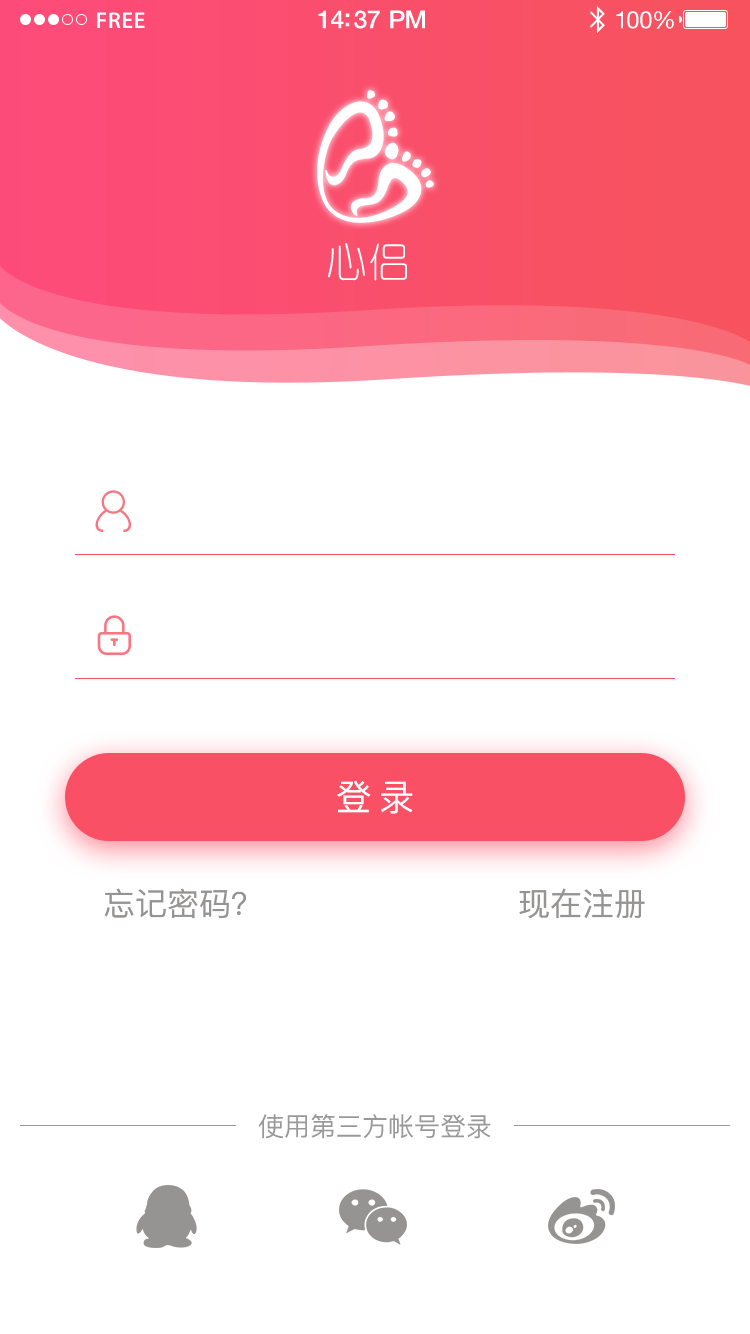
<style>
.page{position:relative;width:750px;height:1334px;background:#ffffff}
.page>*{position:absolute;margin:0}
.t1{font:23px "MyriadPro-Semibold";letter-spacing:0.02em;color:#ffffff}
.t2{font:25px "HelveticaNeue-Medium";letter-spacing:-0.02em;color:#ffffff}
.t3{font:24px "HelveticaNeue";letter-spacing:-0.02em;color:#ffffff}
.t4{font:40.9px "YouYuan";letter-spacing:0.05em;color:#ffffff}
.t5{font:36px "PingFang-SC-Medium";letter-spacing:0.2em;color:#ffffff}
.t6{font:32px "PingFang-SC-Medium";color:#969492;text-transform:uppercase}
.t7{font:26px "PingFang-SC-Medium";color:#999999;text-transform:uppercase}
</style>
<div class="page">
<p class="t1" style="left:97px;top:12px;width:48px;height:16px">FREE</p>
<p class="t2" style="left:318px;top:10px;width:107px;height:19px">14:37 PM</p>
<p class="t3" style="left:616px;top:11px;width:58px;height:18px">100%</p>
<p class="t4" style="left:328px;top:243px;width:79px;height:38px">心侣</p>
<p class="t5" style="left:337px;top:780px;width:76px;height:34px">登录</p>
<p class="t6" style="left:104px;top:888px;width:142px;height:31px">忘记密码？</p>
<p class="t6" style="left:519px;top:888px;width:126px;height:31px">现在注册</p>
<p class="t7" style="left:258px;top:1114px;width:233px;height:25px">使用第三方帐号登录</p>
</div>
